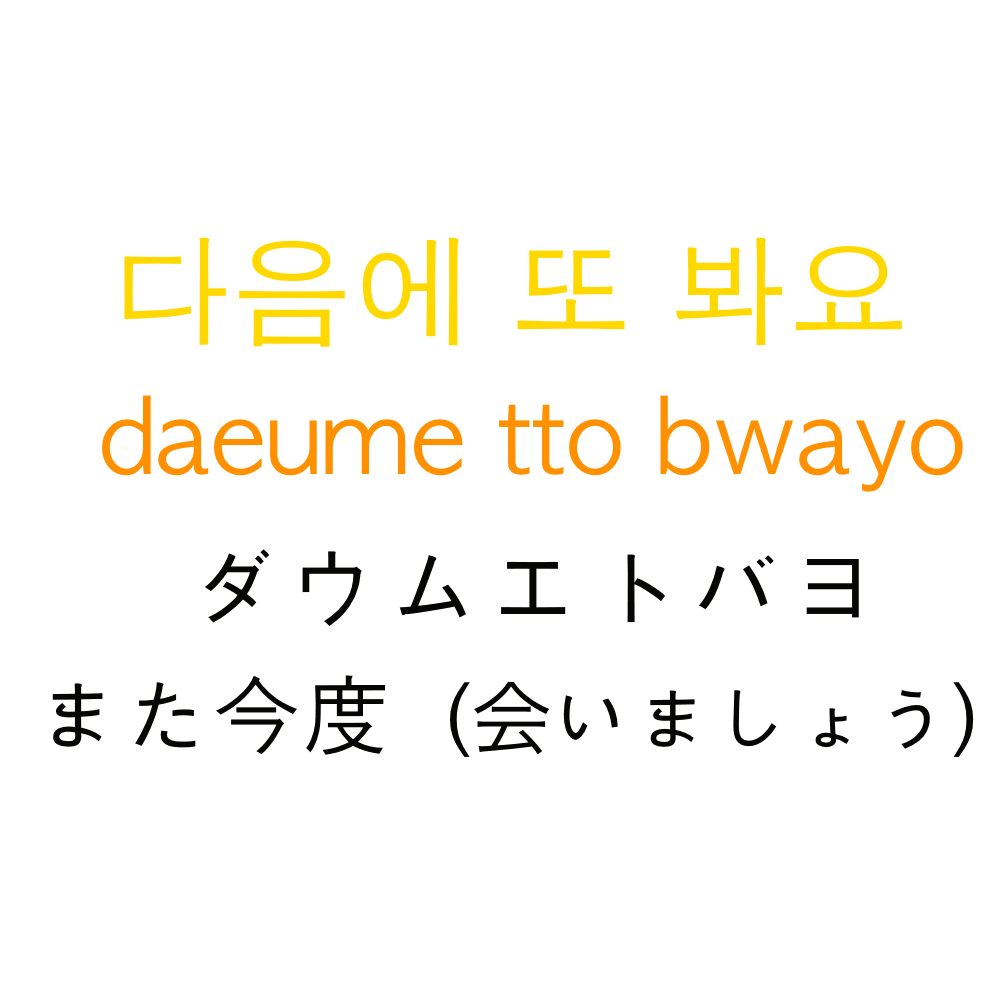
<style>
.page{position:relative;width:1000px;height:1000px;background:#ffffff}
.page>*{position:absolute;margin:0}
.t1{font:120px "AppleGothic";color:#ffd800}
.t2{font:100px "AppleGothic";color:#ff9000}
.t3{font:100px "AppleGothic";color:#060605}
.t4{font:80px "AppleGothic";color:#060605}
.t5{font:90px "AppleGothic";color:#060605}
.t6{font:80px "HiraKakuProN-W3";color:#060605}
</style>
<div class="page">
<p class="t1" style="left:124px;top:237px;width:778px;height:110px">다음에 또 봐요</p>
<p class="t2" style="left:102px;top:395px;width:861px;height:97px">daeume tto bwayo</p>
<p class="t3" style="left:205px;top:549px;width:654px;height:77px">ダウムエトバヨ</p>
<p class="t4" style="left:52px;top:675px;width:922px;height:82px"><span class="t5">また今度</span>（<span class="t6">会</span>いましょう）</p>
</div>
